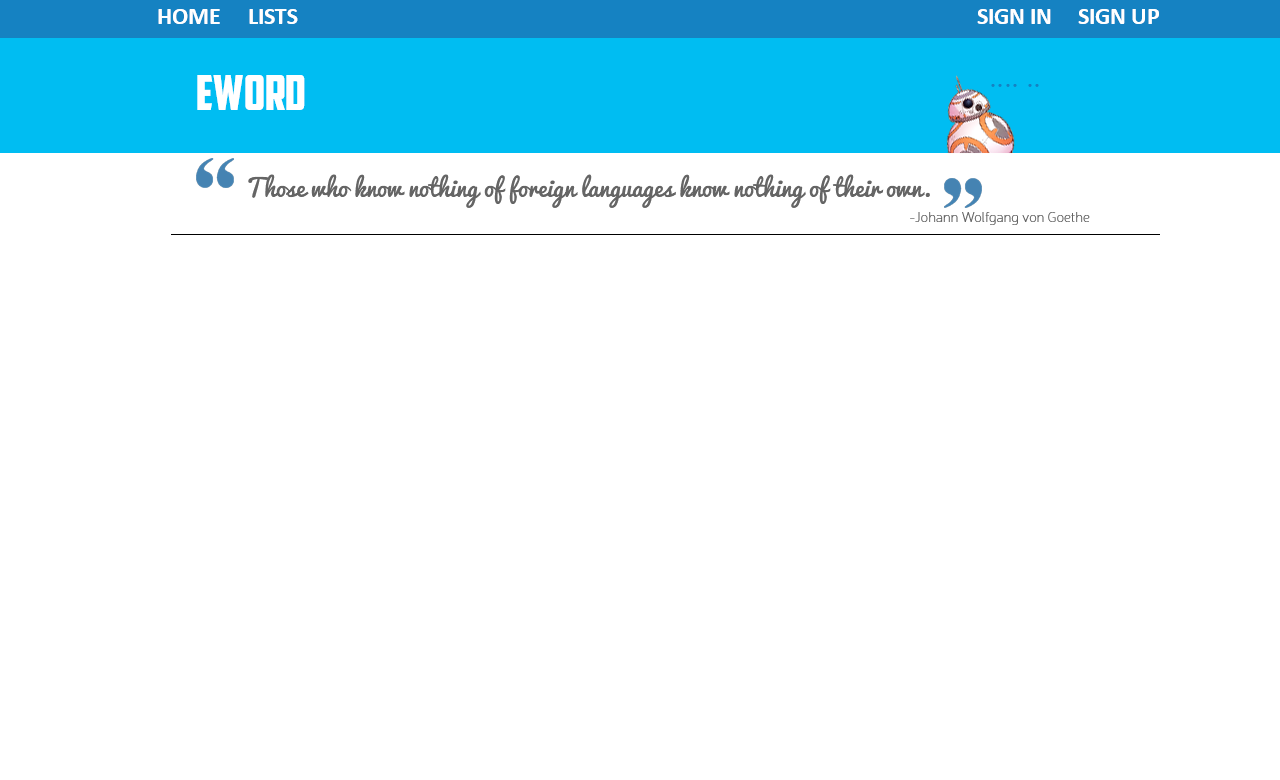
<style>
.page{position:relative;width:1280px;height:780px;background:#ffffff}
.page>*{position:absolute;margin:0}
.t1{font:24px "Calibri-Bold";color:#ffffff}
.t2{font:48px "AmericanCaptain";color:#ffffff}
.t3{font:36px "Neris-Thin";color:#1582c2}
.t4{font:24px "Pacifico-Regular";color:#656565}
.t5{font:14px "Neris-Thin";color:#656565}
</style>
<div class="page">
<p class="t1" style="left:158px;top:9px;width:62px;height:15px">HOME</p>
<p class="t1" style="left:249px;top:9px;width:49px;height:15px">LISTS</p>
<p class="t1" style="left:977px;top:9px;width:74px;height:15px">SIGN IN</p>
<p class="t1" style="left:1078px;top:9px;width:81px;height:15px">SIGN UP</p>
<p class="t2" style="left:197px;top:75px;width:108px;height:35px">Eword</p>
<p class="t3" style="left:991px;top:84px;width:48px;height:3px">···· ··</p>
<p class="t4" style="left:248px;top:174px;width:682px;height:34px">Those who know nothing of foreign languages know nothing of their own.</p>
<p class="t5" style="left:910px;top:212px;width:180px;height:13px">-Johann Wolfgang von Goethe</p>
</div>
